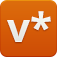
<style>
.page{position:relative;width:57px;height:57px}
.page>*{position:absolute;margin:0}
.t1{font:40.4px "OpenSans-Bold";color:#f6f7f2}
</style>
<div class="page">
<p class="t1" style="left:7px;top:11px;width:44px;height:31px">v*</p>
</div>
